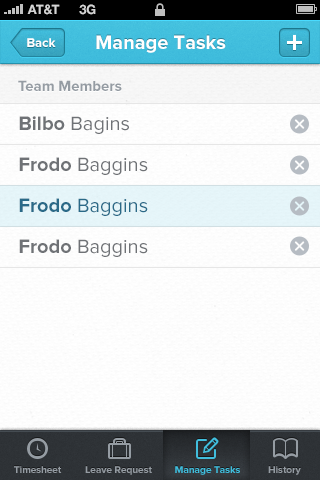
<style>
.page{position:relative;width:320px;height:480px}
.page>*{position:absolute;margin:0}
.t1{font:13px "HelveticaNeue-Bold";color:#d4d4d4;text-transform:uppercase}
.t2{font:13px "ProximaNova-Bold";color:#ffffff}
.t3{font:20px "ProximaNova-Bold";color:#ffffff}
.t4{font:15px "ProximaNova-Bold";color:#959ca3}
.t5{font:20px/41px "ProximaNova-Regular";color:#6f7276}
.t6{font:20px/41px "ProximaNova-Bold";color:#6f7276}
.t7{font:20px/41px "ProximaNova-Bold";color:#2a6a88}
.t8{font:20px/41px "ProximaNova-Regular";color:#2a6a88}
.t9{font:10px "ProximaNova-Bold";color:#959ca3}
.t10{font:10px "ProximaNova-Bold";color:#41bedd}
</style>
<div class="page">
<p class="t1" style="left:27px;top:4px;width:33px;height:11px">AT&amp;t</p>
<p class="t1" style="left:79px;top:4px;width:17px;height:11px">3G</p>
<p class="t2" style="left:27px;top:38px;width:29px;height:9px">Back</p>
<p class="t3" style="left:96px;top:35px;width:130px;height:18px">Manage Tasks</p>
<p class="t4" style="left:18px;top:80px;width:104px;height:11px">Team Members</p>
<p class="t5" style="left:19px;top:116px;width:129px;height:141px"><span class="t6">Bilbo </span>Bagins<br><span class="t6">Frodo </span>Baggins<br><span class="t7">Frodo </span><span class="t8">Baggins<br></span><span class="t6">Frodo </span>Baggins</p>
<p class="t9" style="left:14px;top:466px;width:48px;height:7px">Timesheet</p>
<p class="t9" style="left:85px;top:466px;width:67px;height:9px">Leave Request</p>
<p class="t10" style="left:175px;top:466px;width:65px;height:9px">Manage Tasks</p>
<p class="t10" style="left:175px;top:466px;width:65px;height:9px">Manage Tasks</p>
<p class="t9" style="left:268px;top:466px;width:33px;height:9px">History</p>
</div>
